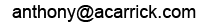
<style>
.page{position:relative;width:203px;height:26px;background:#ffffff}
.page>*{position:absolute;margin:0}
.t1{font:18px "ArialMT";color:#000000}
</style>
<div class="page">
<p class="t1" style="left:12px;top:5px;width:184px;height:17px">anthony@acarrick.com</p>
</div>
